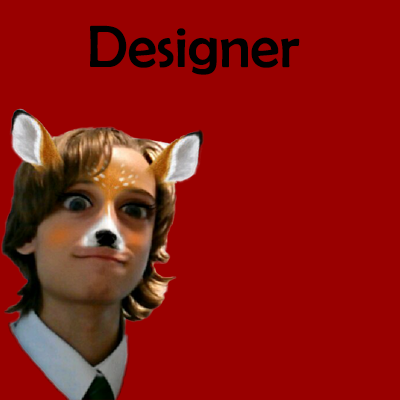
<style>
.page{position:relative;width:400px;height:400px;background:#990000}
.page>*{position:absolute;margin:0}
.t1{font:60px "BerlinSansFB-Reg";color:#000000}
</style>
<div class="page">
<p class="t1" style="left:90px;top:25px;width:210px;height:50px">Designer</p>
</div>
